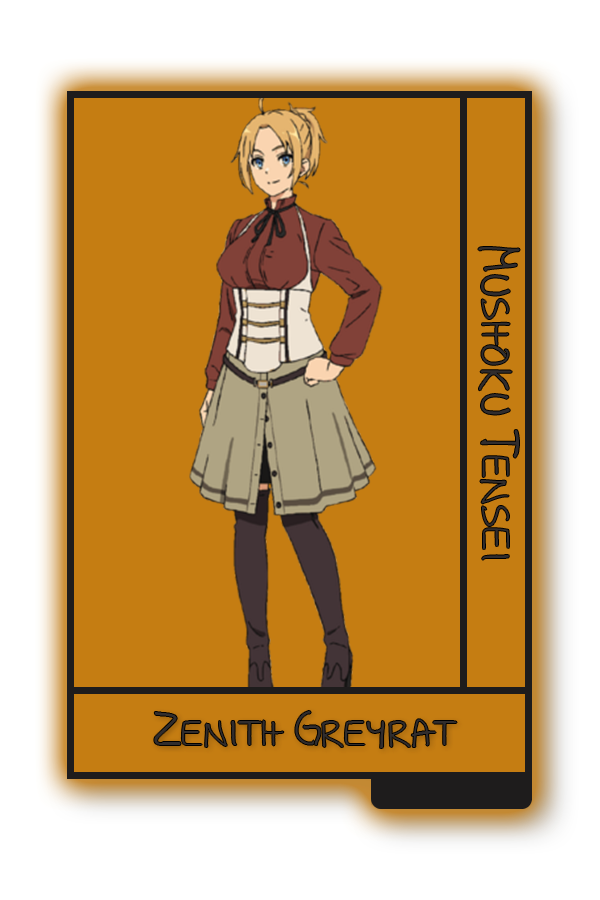
<style>
.page{position:relative;width:600px;height:900px;background:#c57d12}
.page>*{position:absolute;margin:0}
.t1{font:41px "AllCaps";color:#312d2d}
.t2{font:38.3px "AllCaps";color:#312d2d}
</style>
<div class="page">
<p class="t1" style="left:478px;top:247px;width:42px;height:313px;rotate:90deg">Mushoku Tensei</p>
<p class="t2" style="left:154px;top:711px;width:303px;height:37px">Zenith Greyrat</p>
</div>
